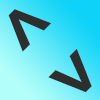
<style>
.page{position:relative;width:100px;height:100px}
.page>*{position:absolute;margin:0}
.t1{font:87.5px "Roboto-Medium";letter-spacing:0.02em;color:#2e2e2e}
</style>
<div class="page">
<p class="t1" style="left:8px;top:9px;width:84px;height:84px;rotate:45deg">&lt; &gt;</p>
</div>
